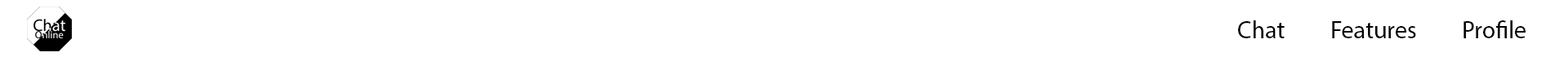
<style>
.page{position:relative;width:1568px;height:57px;background:#ffffff}
.page>*{position:absolute;margin:0}
.t1{font:24.5px "MyriadPro-Regular";color:#000000}
</style>
<div class="page">
<p class="t1" style="left:1238px;top:20px;width:47px;height:18px">Chat</p>
<p class="t1" style="left:1332px;top:21px;width:84px;height:17px">Features</p>
<p class="t1" style="left:1463px;top:20px;width:63px;height:18px">Profile</p>
</div>
